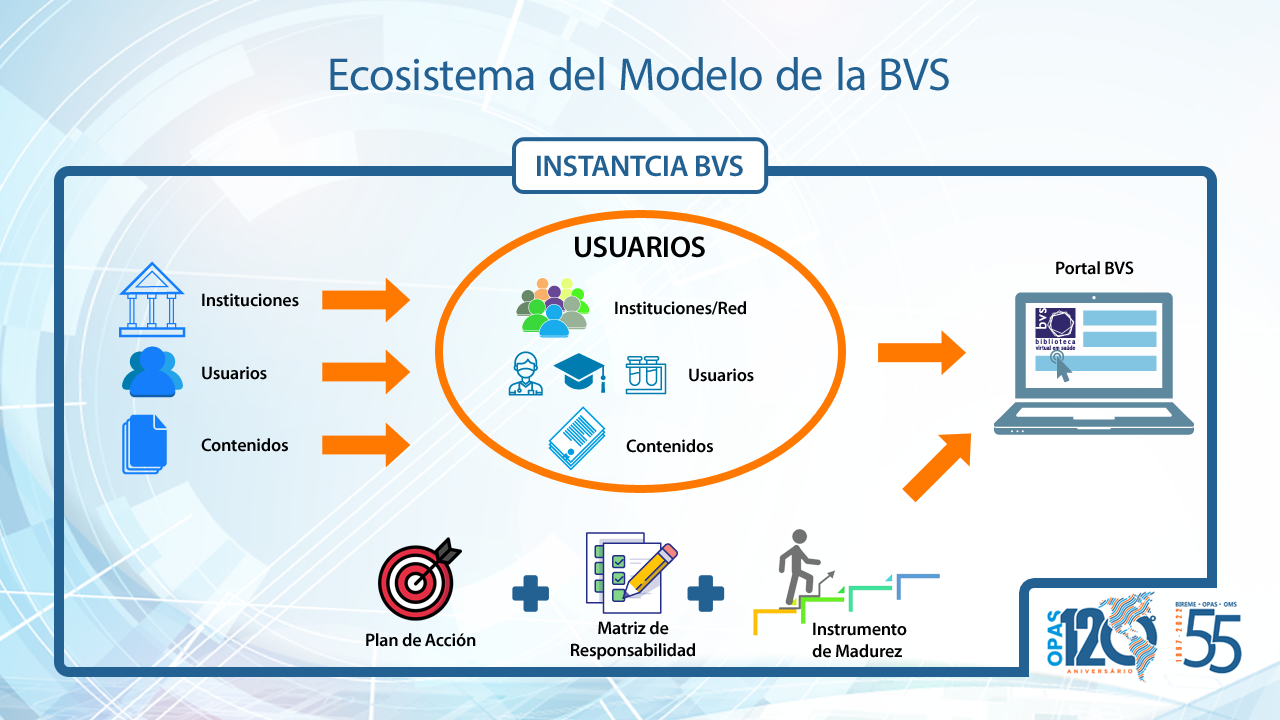
<style>
.page{position:relative;width:1280px;height:720px}
.page>*{position:absolute;margin:0}
.t1{font:65px "MyriadArabic-Regular";letter-spacing:-0.01em;color:#236192}
.t2{font:30px "MyriadPro-Semibold";letter-spacing:-0.01em;color:#236192}
.t3{font:30px "MyriadPro-Semibold";letter-spacing:-0.01em;color:#000000}
.t4{font:18px "MyriadPro-Semibold";letter-spacing:-0.01em;color:#000000}
</style>
<div class="page">
<p class="t1" style="left:330px;top:57px;width:619px;height:34px">Ecosistema del Modelo de la BVS</p>
<p class="t2" style="left:537px;top:155px;width:206px;height:22px">INSTANTCIA BVS</p>
<p class="t3" style="left:575px;top:236px;width:130px;height:22px">USUARIOS</p>
<p class="t4" style="left:1056px;top:261px;width:78px;height:14px">Portal BVS</p>
<p class="t4" style="left:202px;top:293px;width:97px;height:14px">Instituciones</p>
<p class="t4" style="left:615px;top:301px;width:131px;height:14px">Instituciones/Red</p>
<p class="t4" style="left:202px;top:366px;width:65px;height:14px">Usuarios</p>
<p class="t4" style="left:689px;top:368px;width:65px;height:14px">Usuarios</p>
<p class="t4" style="left:201px;top:438px;width:87px;height:14px">Contenidos</p>
<p class="t4" style="left:626px;top:439px;width:87px;height:14px">Contenidos</p>
<p class="t4" style="left:571px;top:621px;width:124px;height:39px;text-align:center">Matriz de<br>Responsabilidad</p>
<p class="t4" style="left:812px;top:622px;width:95px;height:36px">Instrumento<br>de Madurez</p>
<p class="t4" style="left:366px;top:633px;width:110px;height:14px">Plan de Acción</p>
</div>
